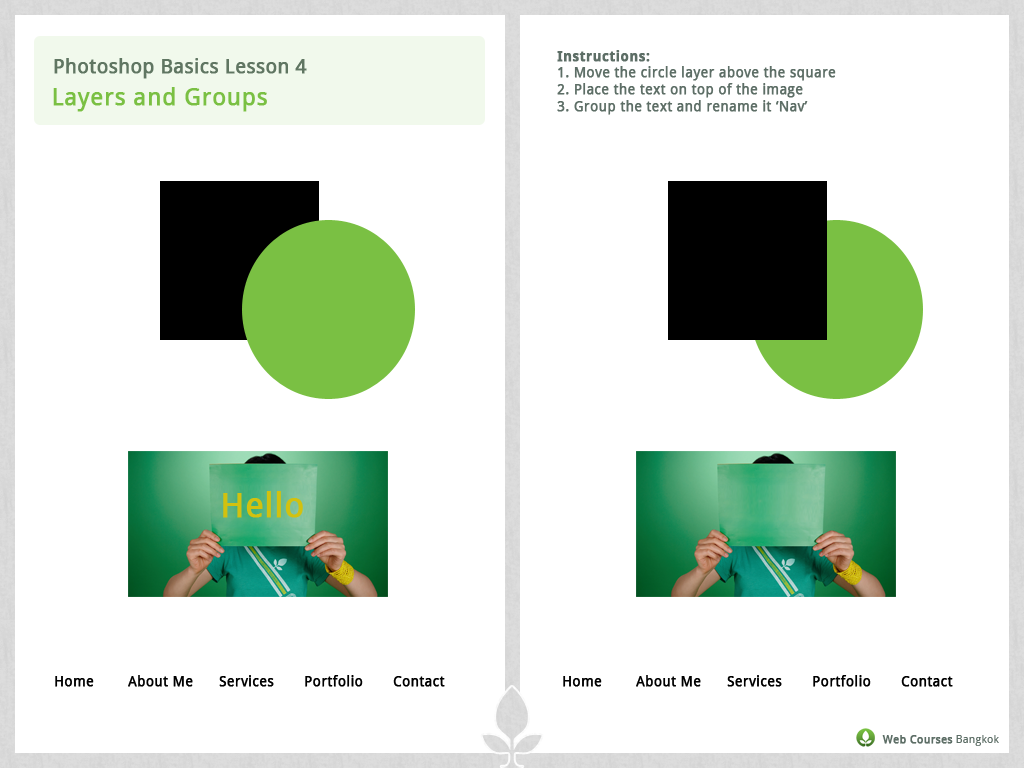
<style>
.page{position:relative;width:1024px;height:768px;background:#ffffff}
.page>*{position:absolute;margin:0}
.t1{font:14px "DroidSans";letter-spacing:0.01em;color:#5d6e66;font-weight:bold}
.t2{font:14px "DroidSans-Bold";letter-spacing:0.01em;color:#5d6e66;font-weight:bold}
.t3{font:19.6px "DroidSans";letter-spacing:0.01em;color:#5d6e66;font-weight:bold}
.t4{font:24px "DroidSans";letter-spacing:0.01em;color:#7ac043;font-weight:bold}
.t5{font:33.9px "DroidSans";letter-spacing:0.01em;color:#d2c10f;font-weight:bold}
.t6{font:14px "DroidSans";letter-spacing:0.01em;color:#000000;font-weight:bold}
.t7{font:11.1px "DroidSans";letter-spacing:0.01em;color:#5d6e66;font-weight:bold}
.t8{font:11.1px "DroidSans";letter-spacing:0.01em;color:#5d6e66}
</style>
<div class="page">
<p class="t1" style="left:557px;top:50px;width:279px;height:65px"><span class="t2">Instructions:<br></span>1. Move the circle layer above the square<br>2. Place the text on top of the image<br>3. Group the text and rename it ‘Nav’</p>
<p class="t3" style="left:54px;top:58px;width:253px;height:21px">Photoshop Basics Lesson 4</p>
<p class="t4" style="left:53px;top:87px;width:214px;height:25px">Layers and Groups</p>
<p class="t5" style="left:223px;top:491px;width:80px;height:27px">Hello</p>
<p class="t6" style="left:55px;top:676px;width:39px;height:11px">Home</p>
<p class="t6" style="left:128px;top:675px;width:65px;height:12px">About Me</p>
<p class="t6" style="left:219px;top:675px;width:55px;height:12px">Services</p>
<p class="t6" style="left:305px;top:675px;width:58px;height:12px">Portfolio</p>
<p class="t6" style="left:393px;top:676px;width:52px;height:11px">Contact</p>
<p class="t6" style="left:563px;top:676px;width:39px;height:11px">Home</p>
<p class="t6" style="left:636px;top:675px;width:65px;height:12px">About Me</p>
<p class="t6" style="left:727px;top:675px;width:55px;height:12px">Services</p>
<p class="t6" style="left:813px;top:675px;width:58px;height:12px">Portfolio</p>
<p class="t6" style="left:901px;top:676px;width:52px;height:11px">Contact</p>
<p class="t7" style="left:882px;top:735px;width:117px;height:11px">Web Courses<span class="t8"> Bangkok</span></p>
</div>
